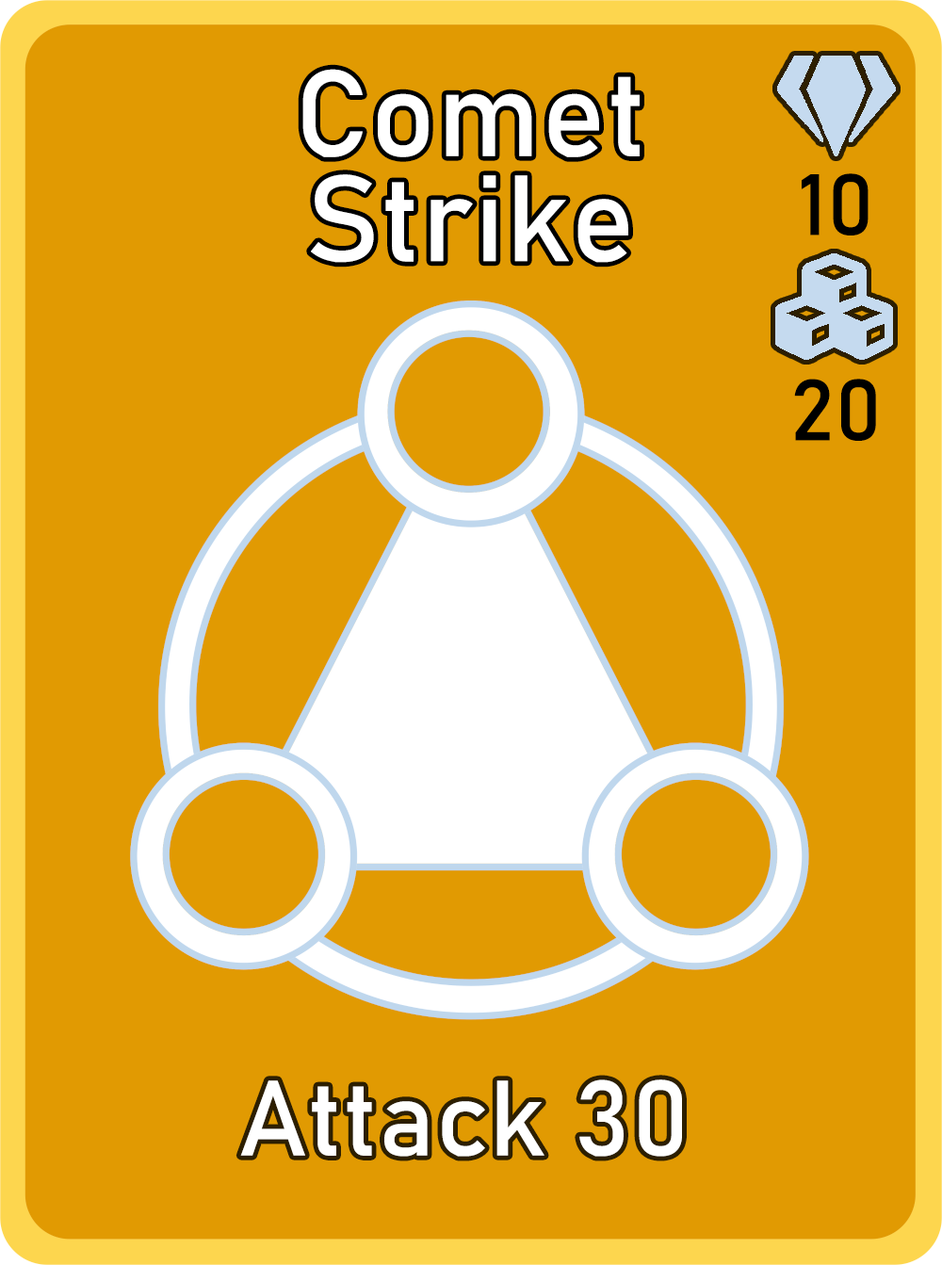
<style>
.page{position:relative;width:942px;height:1265px;background:#e19a02}
.page>*{position:absolute;margin:0}
.t1{font:120.6px/105.1px "Bahnschrift";letter-spacing:0.01em;color:#ffffff}
.t2{font:85px "Bahnschrift";letter-spacing:0.01em;color:#000000}
.t3{font:105.1px "Bahnschrift";letter-spacing:0.01em;color:#ffffff}
</style>
<div class="page">
<p class="t1" style="left:302px;top:69px;width:338px;height:194px;text-align:center">Comet<br>Strike</p>
<p class="t2" style="left:802px;top:173px;width:67px;height:63px">10</p>
<p class="t2" style="left:794px;top:379px;width:82px;height:62px">20</p>
<p class="t3" style="left:240px;top:1080px;width:442px;height:77px">Attack 30</p>
</div>
